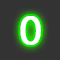
<style>
.page{position:relative;width:60px;height:60px;background:#333333}
.page>*{position:absolute;margin:0}
.t1{font:40px "FZHTJW--GB1-0";color:#ffffff;font-weight:bold}
</style>
<div class="page">
<p class="t1" style="left:20px;top:16px;width:21px;height:29px">0</p>
</div>
